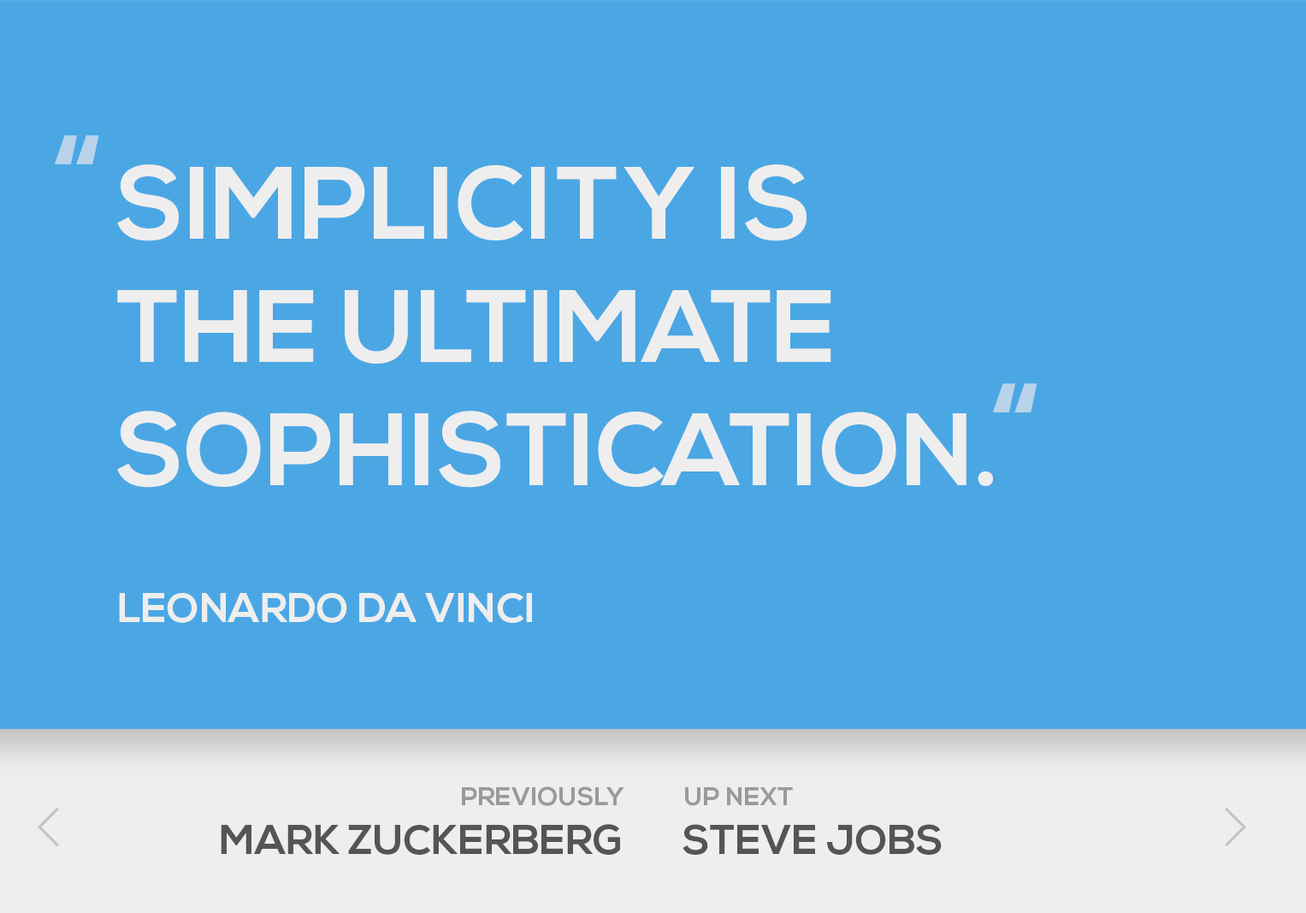
<style>
.page{position:relative;width:1306px;height:913px;background:#4ba7e4}
.page>*{position:absolute;margin:0}
.t1{font:128.4px "NexaBold";color:#b8d3ea}
.t2{font:102.7px "NexaBold";color:#eeeeee}
.t3{font:41.1px "NexaBold";color:#eeeeee}
.t4{font:25.7px "NexaBold";color:#9a9a9a}
.t5{font:41.1px "NexaBold";color:#555555}
</style>
<div class="page">
<p class="t1" style="left:54px;top:135px;width:45px;height:29px">“</p>
<p class="t2" style="left:117px;top:164px;width:876px;height:324px">SIMPLICITY IS<br>THE ULTIMATE <br>SOPHISTICATION.</p>
<p class="t1" style="left:992px;top:383px;width:46px;height:29px">“</p>
<p class="t3" style="left:119px;top:593px;width:413px;height:30px">LEONARDO DA VINCI</p>
<p class="t4" style="left:462px;top:786px;width:163px;height:20px">PREVIOUSLY</p>
<p class="t4" style="left:685px;top:787px;width:108px;height:19px">UP NEXT</p>
<p class="t5" style="left:221px;top:824px;width:399px;height:31px">MARK ZUCKERBERG</p>
<p class="t5" style="left:683px;top:824px;width:259px;height:31px">STEVE JOBS</p>
</div>
